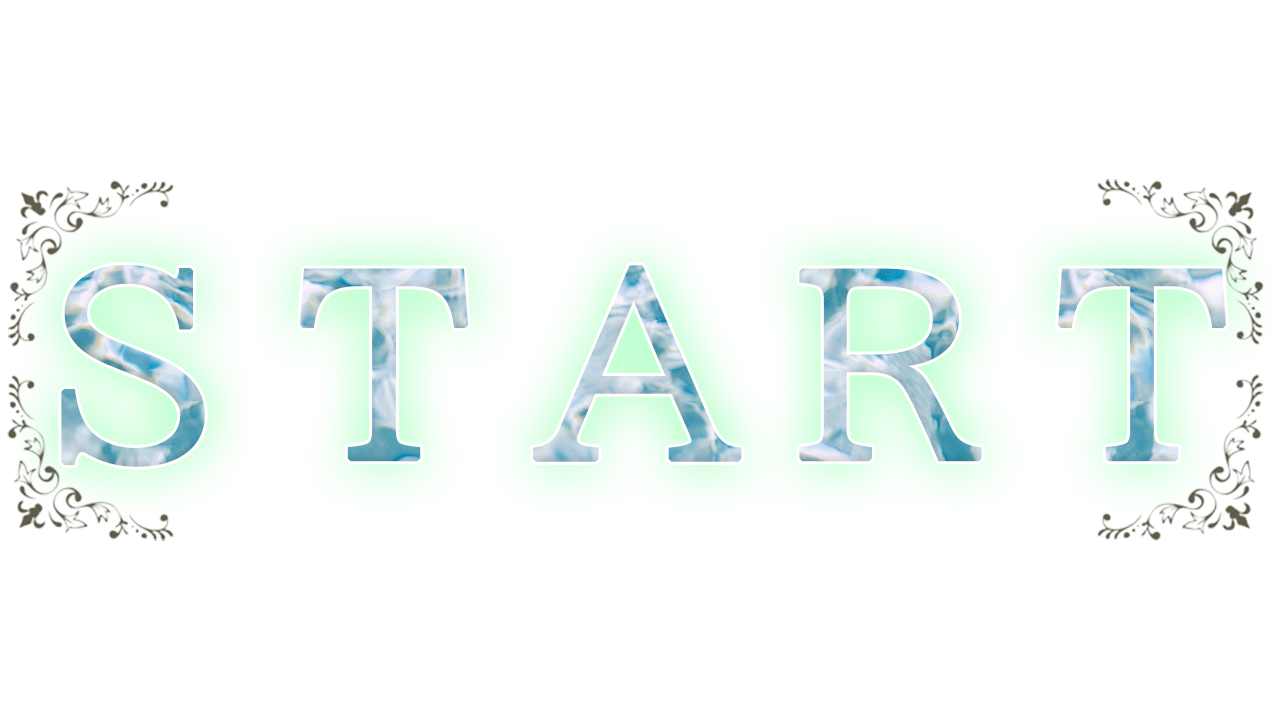
<style>
.page{position:relative;width:1280px;height:720px;background:#ffffff}
.page>*{position:absolute;margin:0}
.t1{font:246.3px "BIZ-UDMincho-Medium";font-weight:bold}
</style>
<div class="page">
<p class="t1" style="left:61px;top:264px;width:1165px;height:203px">ＳＴＡＲＴ</p>
</div>
